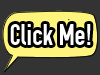
<style>
.page{position:relative;width:100px;height:75px;background:#333333}
.page>*{position:absolute;margin:0}
.t1{font:30px "OSP-DIN";color:#ffffff}
</style>
<div class="page">
<p class="t1" style="left:10px;top:24px;width:81px;height:21px">Click Me!</p>
</div>
